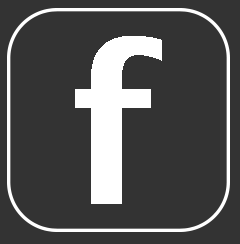
<style>
.page{position:relative;width:240px;height:244px;background:#333333}
.page>*{position:absolute;margin:0}
.t1{font:215px "LucidaGrande-Bold";letter-spacing:-0.18em;color:#ffffff}
</style>
<div class="page">
<p class="t1" style="left:75px;top:36px;width:87px;height:168px">f</p>
</div>
